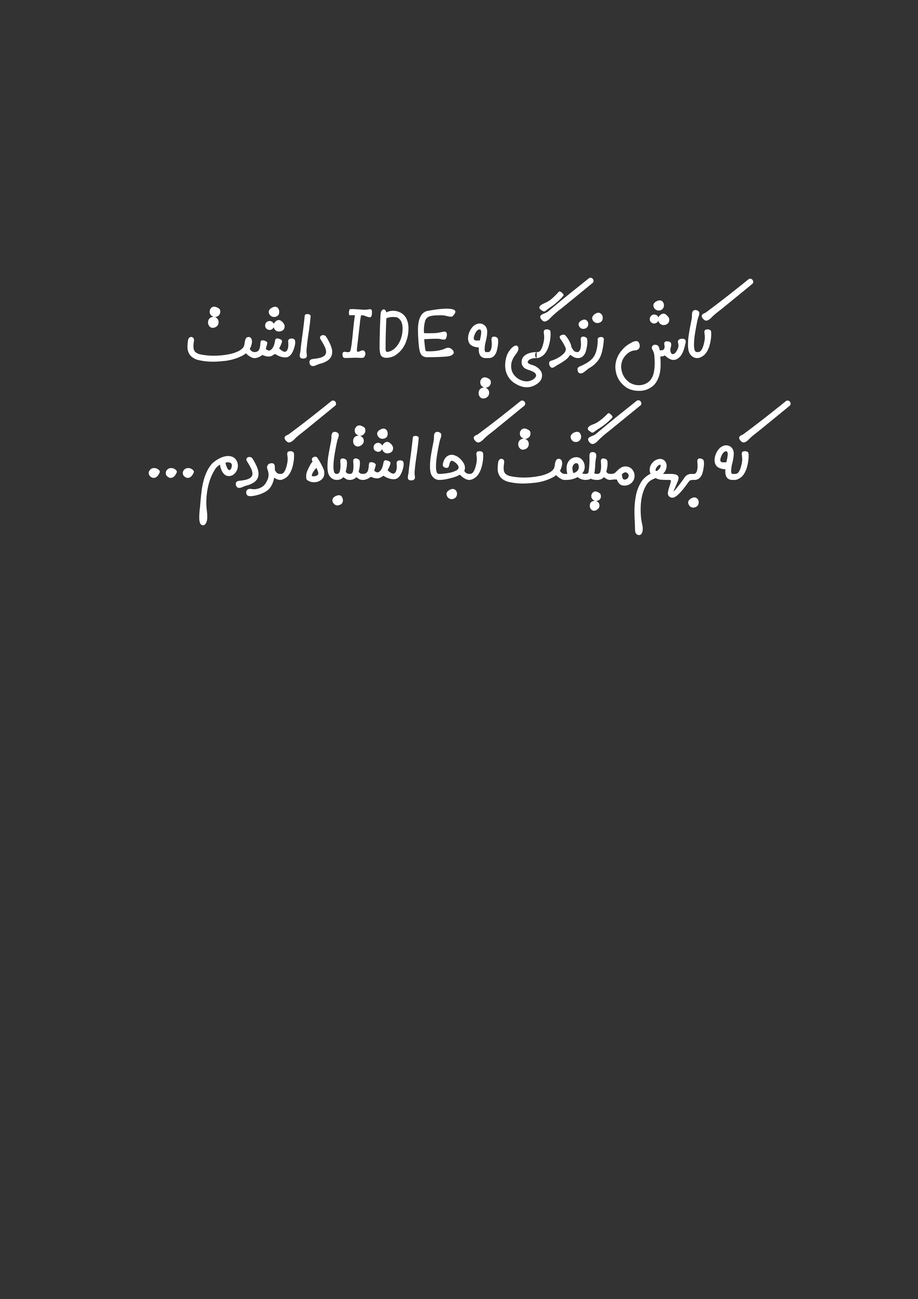
<style>
.page{position:relative;width:918px;height:1299px;background:#333333}
.page>*{position:absolute;margin:0}
.t1{font:96.4px/121.9px "Digi-Gran-Payeh-Bold";color:#ffffff}
</style>
<div class="page">
<p class="t1" style="left:148px;top:278px;width:643px;height:257px;text-align:center">کاش زندگی یه IDE داشت<br>که بهم میگفت کجا اشتباه کردم ...</p>
</div>
